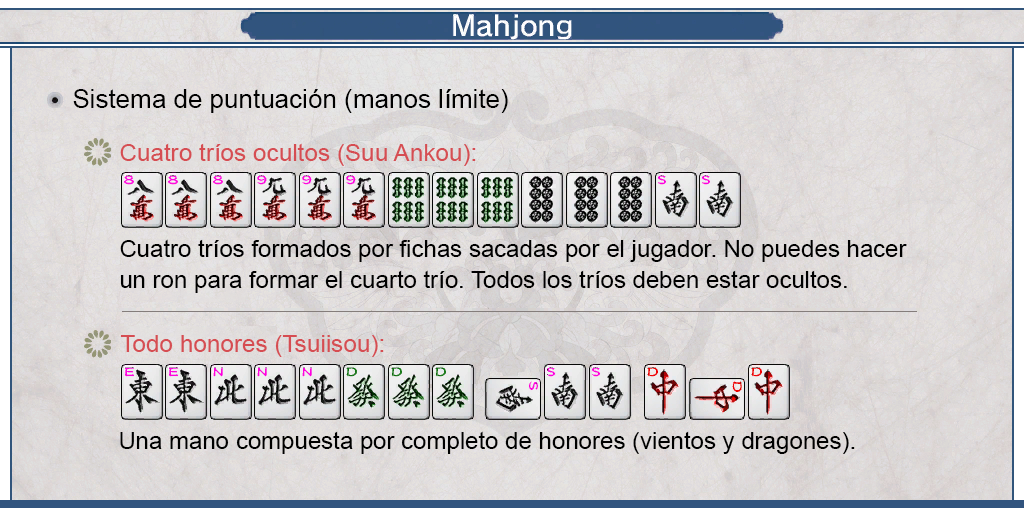
<style>
.page{position:relative;width:1024px;height:512px}
.page>*{position:absolute;margin:0}
.t1{font:26px "ArialMT";color:#000000}
.t2{font:24px "ArialMT";color:#d64d52}
.t3{font:24px/31px "ArialMT";color:#000000}
.t4{font:24px "ArialMT";color:#000000}
</style>
<div class="page">
<p class="t1" style="left:73px;top:89px;width:435px;height:24px">Sistema de puntuación (manos límite)</p>
<p class="t2" style="left:120px;top:143px;width:356px;height:23px">Cuatro tríos ocultos (Suu Ankou):</p>
<p class="t3" style="left:120px;top:239px;width:787px;height:54px;text-align:justify">Cuatro tríos formados por fichas sacadas por el jugador. No puedes hacer<br>un ron para formar el cuarto trío. Todos los tríos deben estar ocultos.</p>
<p class="t2" style="left:120px;top:335px;width:264px;height:22px">Todo honores (Tsuiisou):</p>
<p class="t4" style="left:120px;top:431px;width:735px;height:23px">Una mano compuesta por completo de honores (vientos y dragones).</p>
</div>
